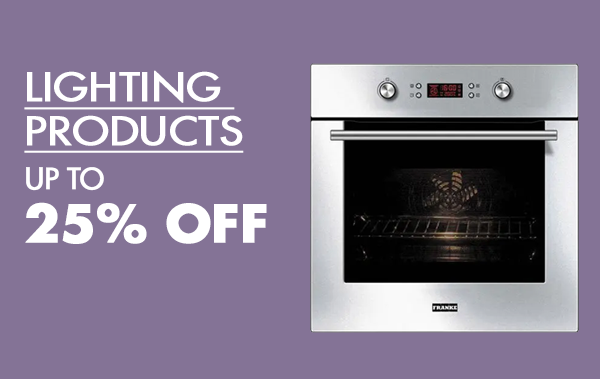
<style>
.page{position:relative;width:600px;height:379px;background:#847396}
.page>*{position:absolute;margin:0}
.t1{font:38px/43.3px "FuturaLTPro-Medium";color:#ffffff;text-transform:uppercase;font-weight:bold;text-decoration:underline;scale:1.14 1}
.t2{font:50.3px/52.3px "FuturaLTPro-Bold";color:#ffffff;font-weight:bold}
.t3{font:28.5px/43.3px "FuturaLTPro-Medium";color:#ffffff;font-weight:bold}
</style>
<div class="page">
<p class="t1" style="left:24px;top:70px;width:220px;height:83px">LIGHTING <br>PRODUCTS</p>
<p class="t2" style="left:25px;top:167px;width:242px;height:78px"><span class="t3">UP TO<br></span>30% OFF</p>
<p class="t2" style="left:25px;top:167px;width:242px;height:77px"><span class="t3">UP TO<br></span>25% OFF</p>
<p class="t2" style="left:26px;top:167px;width:241px;height:78px"><span class="t3">UP TO<br></span>50% OFF</p>
</div>
